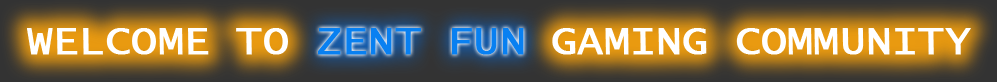
<style>
.page{position:relative;width:997px;height:82px}
.page>*{position:absolute;margin:0}
.t1{font:41.7px "LucidaConsole";color:#ffffff;font-weight:bold}
.t2{font:41.7px "LucidaConsole";color:#0880f1;font-weight:bold}
</style>
<div class="page">
<p class="t1" style="left:27px;top:28px;width:944px;height:27px">WELCOME TO          GAMING COMMUNITY</p>
<p class="t2" style="left:318px;top:28px;width:206px;height:27px">ZENT FUN</p>
</div>
